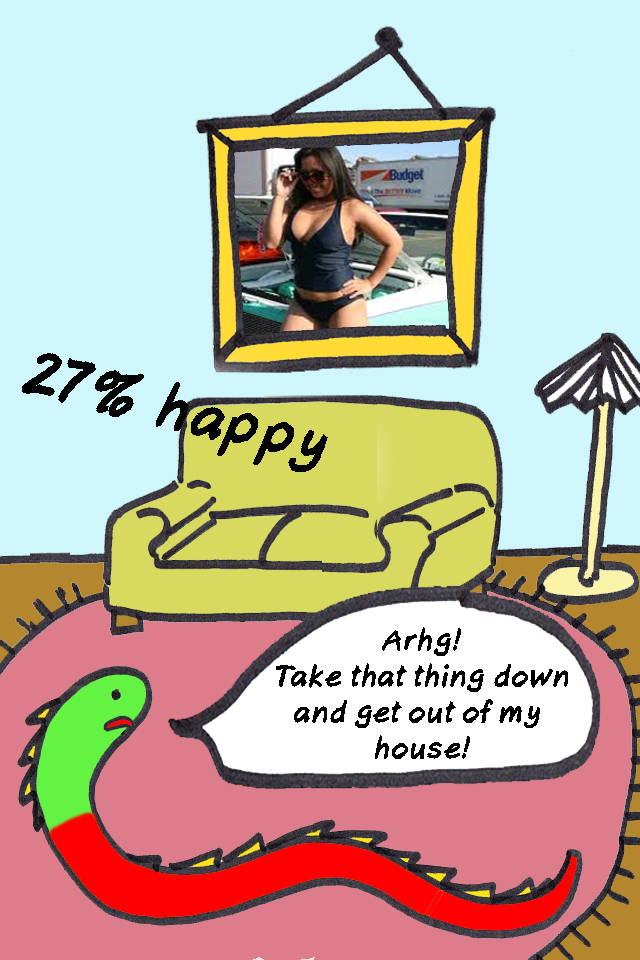
<style>
.page{position:relative;width:640px;height:960px;background:#cef6fb}
.page>*{position:absolute;margin:0}
.t1{font:59.8px "AxureHandwriting-BoldItalic";color:#000000}
.t2{font:30px "AxureHandwriting-BoldItalic";color:#000000}
</style>
<div class="page">
<p class="t1" style="left:22px;top:353px;width:306px;height:119px;rotate:14deg">27% happy</p>
<p class="t2" style="left:276px;top:627px;width:292px;height:132px;text-align:center">Arhg!<br>Take that thing down<br>and get out of my <br>house!</p>
</div>
